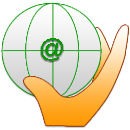
<style>
.page{position:relative;width:130px;height:130px;background:#ffffff}
.page>*{position:absolute;margin:0}
.t1{font:25.8px "ArialMT";color:#009900}
</style>
<div class="page">
<p class="t1" style="left:41px;top:38px;width:22px;height:23px">@</p>
</div>
